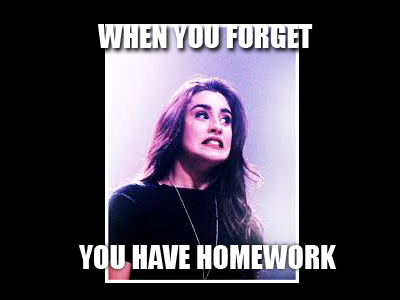
<style>
.page{position:relative;width:400px;height:300px;background:#000000}
.page>*{position:absolute;margin:0}
.t1{font:30px "Impact";color:#ffffff}
</style>
<div class="page">
<p class="t1" style="left:97px;top:24px;width:216px;height:24px">WHEN YOU FORGET</p>
<p class="t1" style="left:79px;top:245px;width:258px;height:24px">YOU HAVE HOMEWORK</p>
</div>
